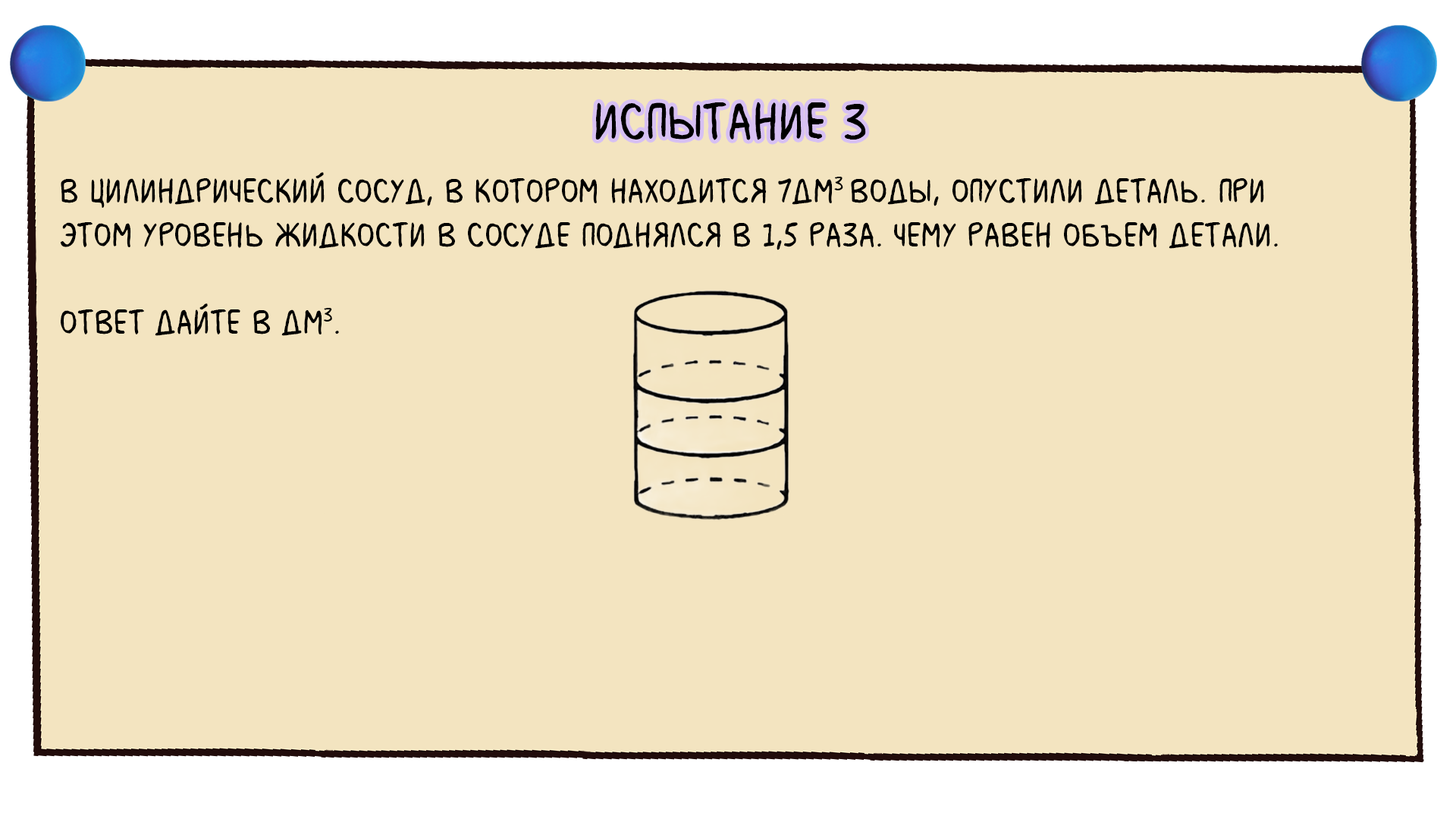
<style>
.page{position:relative;width:1456px;height:819px;background:#f3e4c0}
.page>*{position:absolute;margin:0}
.t1{font:54.6px "MilkMustacheBB";color:#000000}
.t2{font:36.4px "MilkMustacheBB";color:#000000}
</style>
<div class="page">
<p class="t1" style="left:595px;top:102px;width:271px;height:39px">испытание 3</p>
<p class="t2" style="left:60px;top:172px;width:1218px;height:164px">В цилиндрический сосуд, в котором находится 7дм3 воды, опустили деталь. При <br>этом уровень жидкости в сосуде поднялся в 1,5 раза. Чему равен объем детали.<br><br>Ответ дайте в дм3.</p>
</div>
